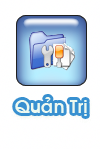
<style>
.page{position:relative;width:100px;height:149px;background:#ffffff}
.page>*{position:absolute;margin:0}
.t1{font:18px "VNI-Avo-Bold";color:#eef9ef}
</style>
<div class="page">
<p class="t1" style="left:15px;top:97px;width:72px;height:19px">Quaûn Trò</p>
</div>
